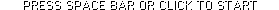
<style>
.page{position:relative;width:279px;height:10px;background:#ffffff}
.page>*{position:absolute;margin:0}
.t1{font:12px "Geneva";color:#000000}
</style>
<div class="page">
<p class="t1" style="left:24px;top:1px;width:233px;height:9px">PRESS SPACE BAR OR CLICK TO START</p>
</div>
